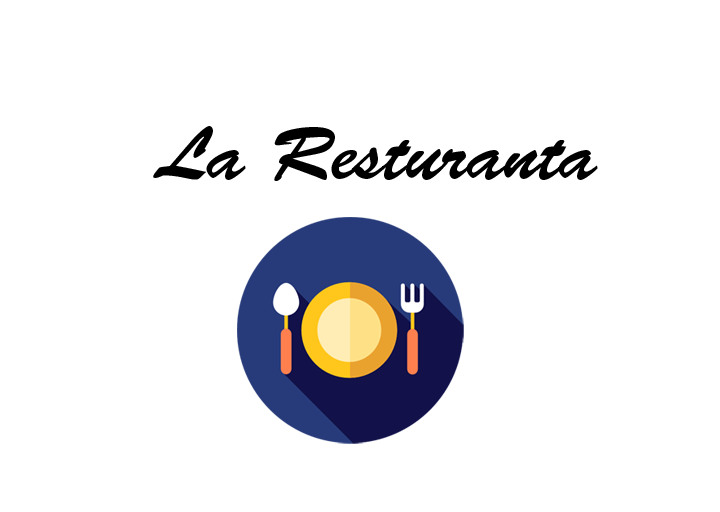
<style>
.page{position:relative;width:720px;height:512px;background:#ffffff}
.page>*{position:absolute;margin:0}
.t1{font:75px "BrushScriptStd";color:#000000}
</style>
<div class="page">
<p class="t1" style="left:153px;top:126px;width:445px;height:55px">La Resturanta</p>
</div>
